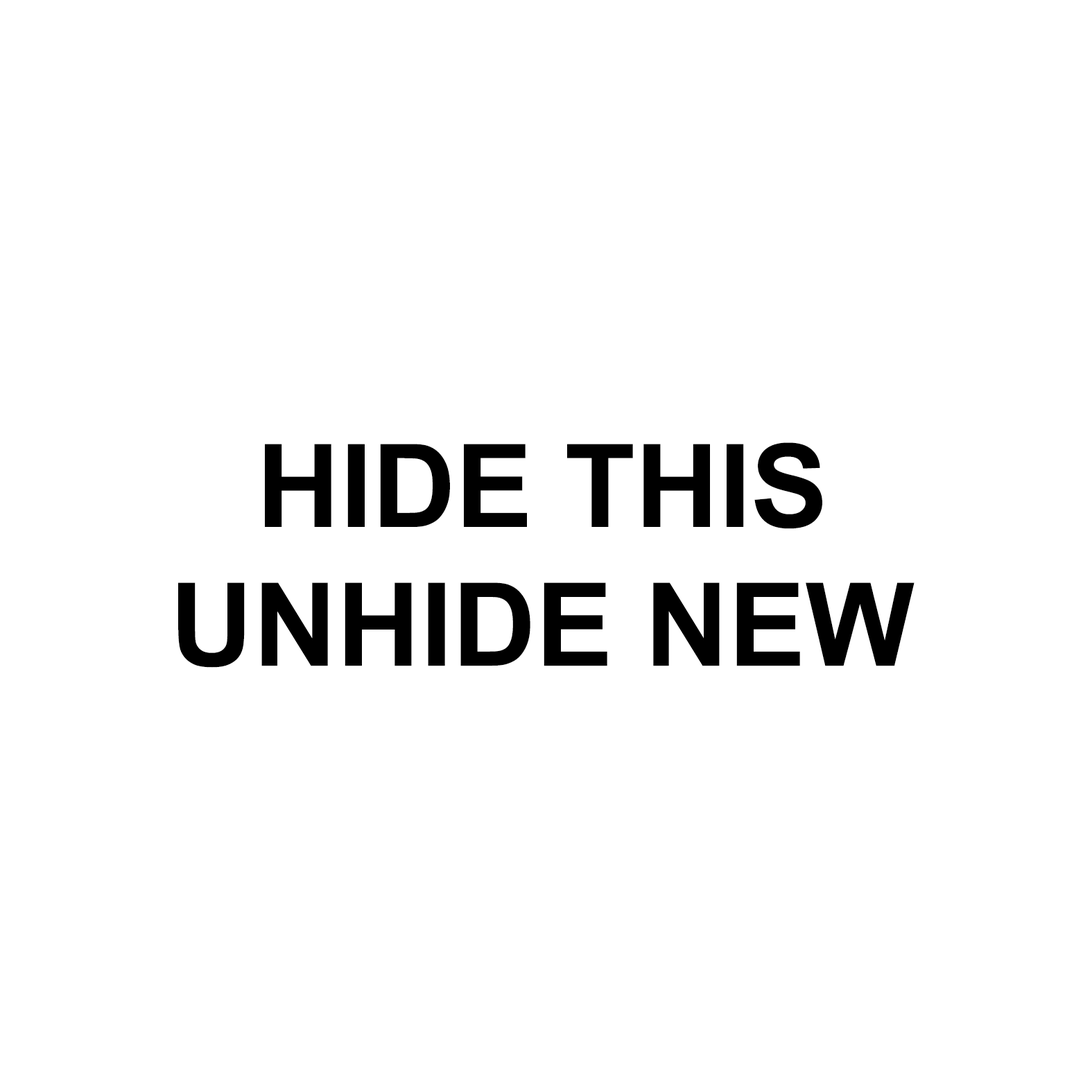
<style>
.page{position:relative;width:1092px;height:1092px;background:#ffffff}
.page>*{position:absolute;margin:0}
.t1{font:115.6px "Arial-BoldMT";color:#000000}
</style>
<div class="page">
<p class="t1" style="left:178px;top:442px;width:736px;height:226px;text-align:center">HIDE THIS<br>UNHIDE NEW</p>
</div>
